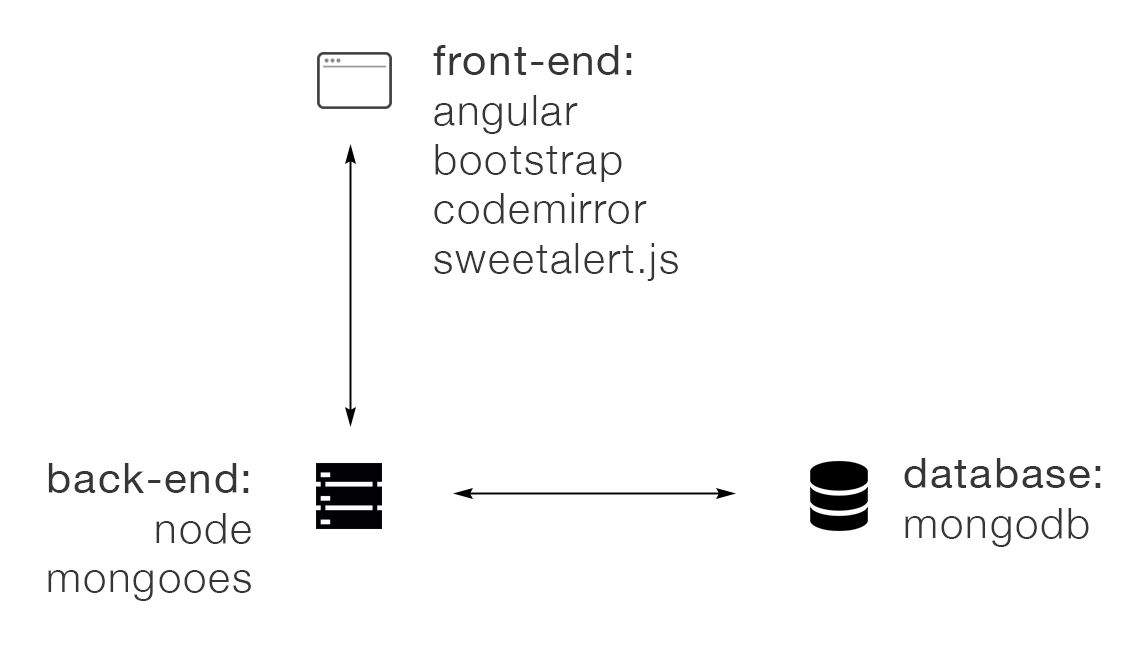
<style>
.page{position:relative;width:1147px;height:665px;background:#ffffff}
.page>*{position:absolute;margin:0}
.t1{font:42.3px/49.4px "HelveticaNeue-Light";letter-spacing:0.04em;color:#363636}
.t2{font:42.3px/49.4px "HelveticaNeue";letter-spacing:0.04em;color:#363636}
</style>
<div class="page">
<p class="t1" style="left:433px;top:45px;width:245px;height:236px"><span class="t2">front-end:<br></span>angular<br>bootstrap<br>codemirror<br>sweetalert.js</p>
<p class="t2" style="left:904px;top:458px;width:197px;height:89px">database:<br><span class="t1">mongodb</span></p>
<p class="t1" style="left:48px;top:463px;width:203px;height:138px;text-align:right"><span class="t2">back-end:<br></span>node<br>mongooes</p>
</div>
